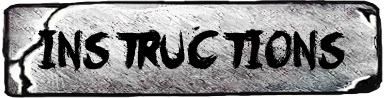
<style>
.page{position:relative;width:384px;height:98px}
.page>*{position:absolute;margin:0}
.t1{font:49px "OhNo";color:#010101}
</style>
<div class="page">
<p class="t1" style="left:29px;top:26px;width:320px;height:48px">INSTRUCTIONS</p>
</div>
